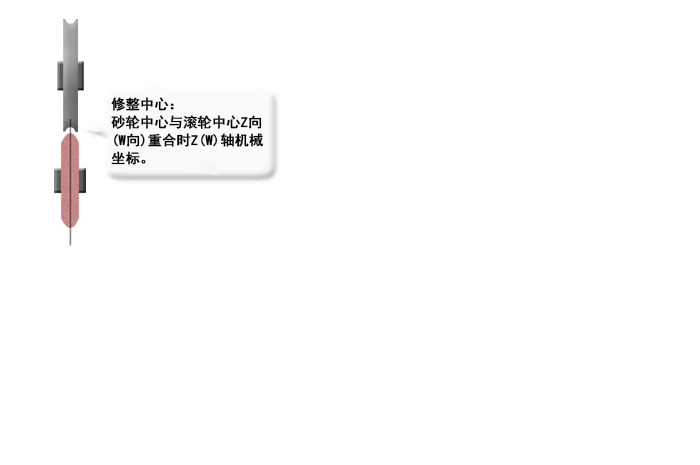
<style>
.page{position:relative;width:700px;height:465px;background:#ffffff}
.page>*{position:absolute;margin:0}
.t1{font:14px/18px "SimHei";color:#050505;font-weight:bold}
</style>
<div class="page">
<p class="t1" style="left:111px;top:97px;width:153px;height:68px">修整中心：<br>砂轮中心与滚轮中心Z向(W向)重合时Z(W)轴机械坐标。</p>
</div>
